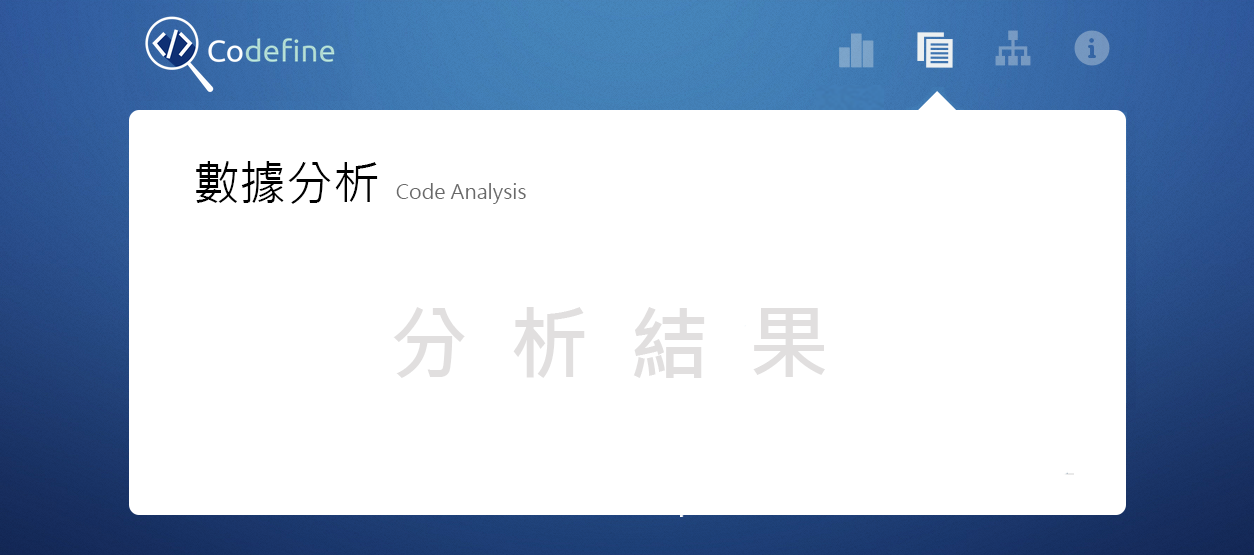
<style>
.page{position:relative;width:1254px;height:555px;background:#ffffff}
.page>*{position:absolute;margin:0}
.t1{font:46.7px "MicrosoftJhengHeiRegular";color:#010101}
.t2{font:20px "MicrosoftJhengHeiRegular";color:#696969}
.t3{font:80px "MicrosoftJhengHeiBold";color:#e1dfdf}
</style>
<div class="page">
<p class="t1" style="left:196px;top:161px;width:182px;height:43px">數據分析</p>
<p class="t2" style="left:396px;top:183px;width:130px;height:21px">Code Analysis</p>
<p class="t3" style="left:393px;top:307px;width:432px;height:71px">分  析  結  果</p>
</div>
